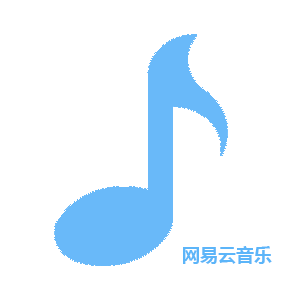
<style>
.page{position:relative;width:300px;height:300px;background:#ffffff}
.page>*{position:absolute;margin:0}
.t1{font:18px "MicrosoftYaHei-Bold";color:#5cb5f9}
</style>
<div class="page">
<p class="t1" style="left:183px;top:246px;width:89px;height:18px">网易云音乐</p>
<p class="t1" style="left:183px;top:246px;width:89px;height:18px">网易云音乐</p>
</div>
